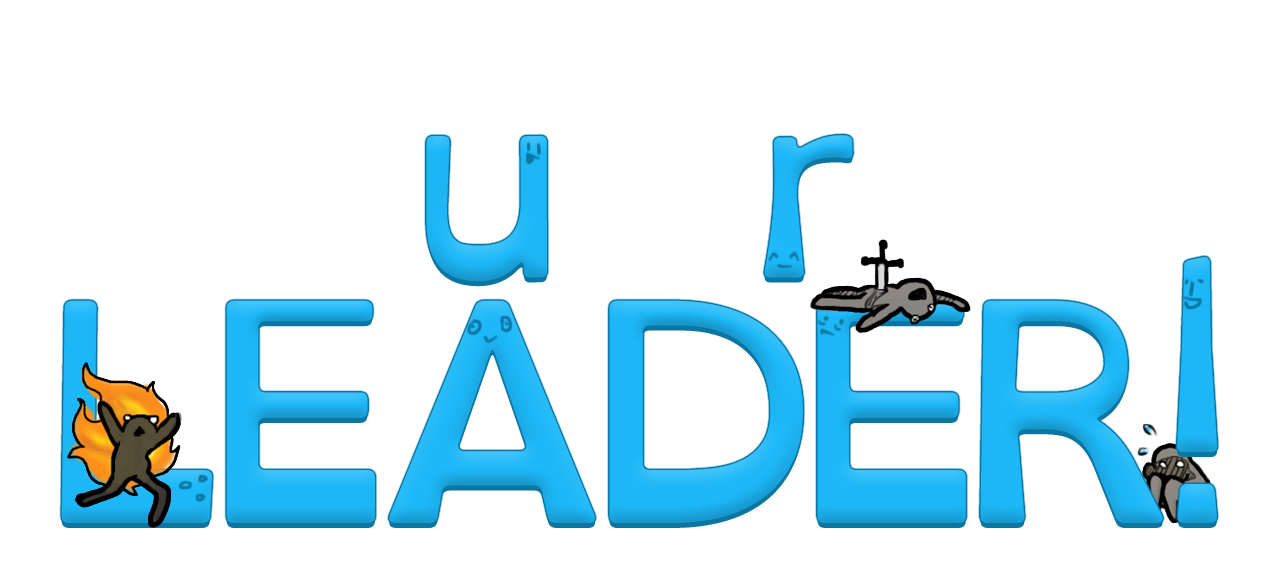
<style>
.page{position:relative;width:1279px;height:566px;background:#ffffff}
.page>*{position:absolute;margin:0}
.t1{font:258.1px/245.4px "OpenDyslexicThree-Regular";letter-spacing:-0.09em;color:#1db8f8;scale:1.03 1}
.t2{font:258.1px/210.4px "OpenDyslexicThree-Regular";letter-spacing:-0.09em;color:#1db8f8;scale:1.03 1}
</style>
<div class="page">
<p class="t1" style="left:61px;top:135px;width:1156px;height:388px;text-align:center"><span class="t2">u r<br></span>LEADER!</p>
</div>
